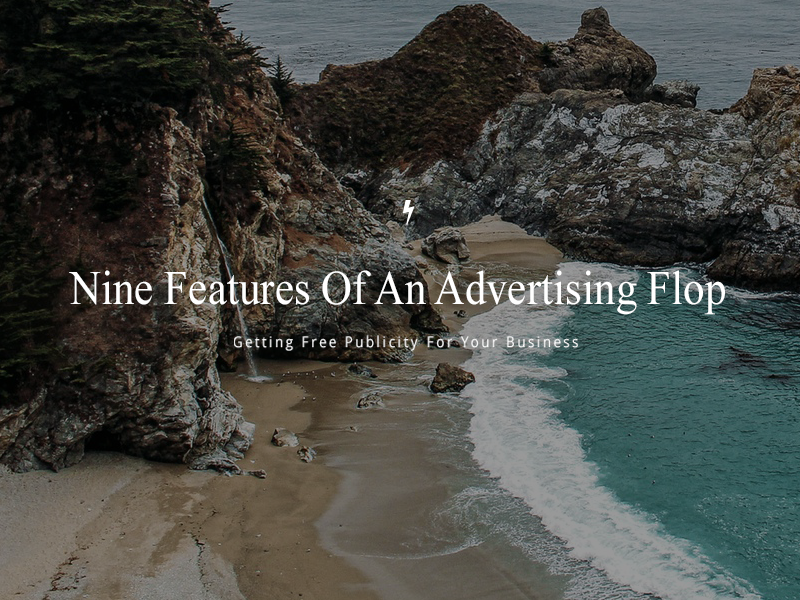
<style>
.page{position:relative;width:800px;height:600px}
.page>*{position:absolute;margin:0}
.t1{font:48px "TimesNewRomanPSMT";color:#ffffff;scale:0.89 1}
.t2{font:14.8px "OpenSans";letter-spacing:0.2em;color:#ffffff;scale:0.89 1}
</style>
<div class="page">
<p class="t1" style="left:69px;top:270px;width:656px;height:45px">Nine Features Of An Advertising Flop</p>
<p class="t2" style="left:234px;top:335px;width:344px;height:16px">Getting Free Publicity For Your Business</p>
</div>
